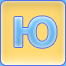
<style>
.page{position:relative;width:66px;height:66px}
.page>*{position:absolute;margin:0}
.t1{font:41px "Tahoma-Bold"}
</style>
<div class="page">
<p class="t1" style="left:14px;top:16px;width:43px;height:32px">Ю</p>
<p class="t1" style="left:14px;top:16px;width:43px;height:32px">Ю</p>
</div>
